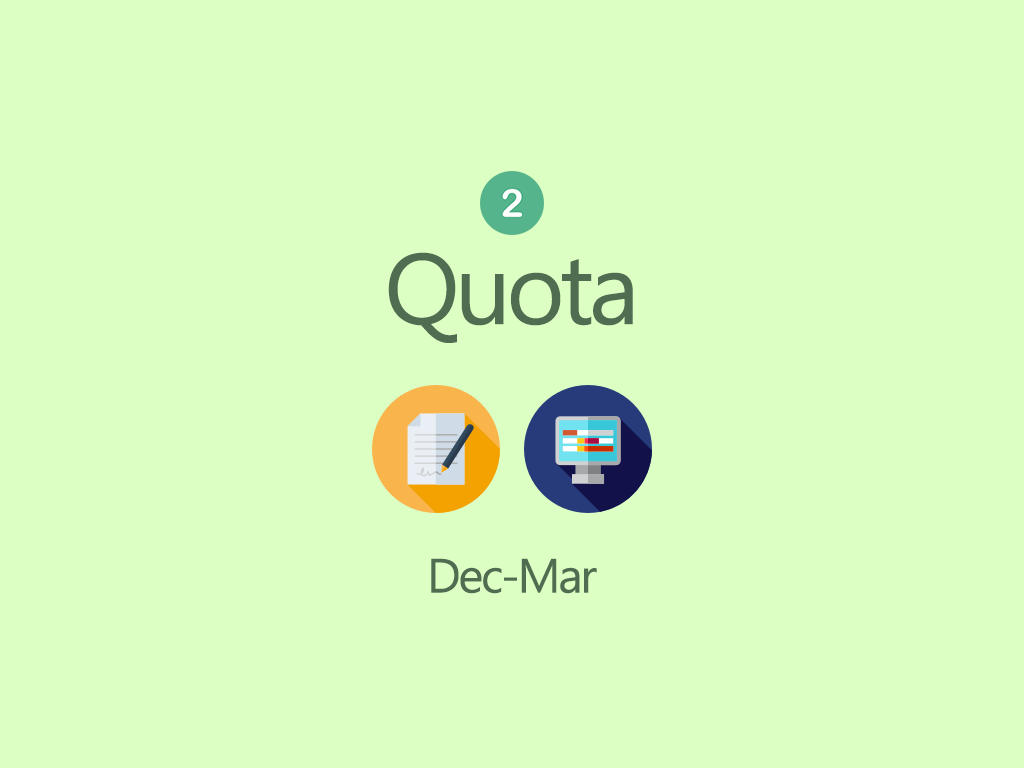
<style>
.page{position:relative;width:1024px;height:768px;background:#dcffc3}
.page>*{position:absolute;margin:0}
.t1{font:100px "MicrosoftTaiLe";letter-spacing:-0.05em;color:#506d52}
.t2{font:48px "MicrosoftTaiLe";letter-spacing:-0.05em;color:#506d52}
</style>
<div class="page">
<p class="t1" style="left:388px;top:252px;width:245px;height:91px">Quota</p>
<p class="t2" style="left:431px;top:558px;width:166px;height:36px">Dec-Mar</p>
</div>
